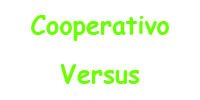
<style>
.page{position:relative;width:200px;height:100px;background:#ffffff}
.page>*{position:absolute;margin:0}
.t1{font:25px "ComicSansMS-Bold";color:#6cff00}
</style>
<div class="page">
<p class="t1" style="left:31px;top:15px;width:138px;height:26px">Cooperativo</p>
<p class="t1" style="left:60px;top:64px;width:80px;height:20px">Versus</p>
</div>
